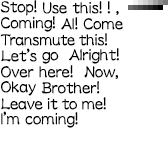
<style>
.page{position:relative;width:168px;height:160px;background:#ffffff}
.page>*{position:absolute;margin:0}
.t1{font:19px/16px "DFLeiSho-SB-WINP-RKSJ-H";color:#000000;scale:0.84 1}
.t2{font:19px/16px "DFLeiSho-SB-WINP-RKSJ-H";letter-spacing:-0.075em;color:#000000;scale:0.78 1}
.t3{font:19px/16px "DFLeiSho-SB-WINP-RKSJ-H";letter-spacing:-0.01em;color:#000000;scale:0.82 1}
.t4{font:19px/16px "DFLeiSho-SB-WINP-RKSJ-H";letter-spacing:-0.01em;color:#000000;scale:0.83 1}
.t5{font:19px/16px "DFLeiSho-SB-WINP-RKSJ-H";color:#000000;scale:0.83 1}
.t6{font:19px/16px "DFLeiSho-SB-WINP-RKSJ-H";letter-spacing:-0.01em;color:#000000;scale:0.81 1}
.t7{font:19px/16px "DFLeiSho-SB-WINP-RKSJ-H";letter-spacing:-0.05em;color:#000000;scale:0.81 1}
.t8{font:19px/16px "DFLeiSho-SB-WINP-RKSJ-H";letter-spacing:0.01em;color:#000000;scale:0.84 1}
.t9{font:19px/16px "DFLeiSho-SB-WINP-RKSJ-H";letter-spacing:-0.8em;color:#000000;scale:0.84 1}
.t10{font:19px/16px "DFLeiSho-SB-WINP-RKSJ-H";letter-spacing:-0.01em;color:#000000;scale:0.8 1}
.t11{font:19px/16px "DFLeiSho-SB-WINP-RKSJ-H";letter-spacing:-0.01em;color:#000000;scale:0.84 1}
</style>
<div class="page">
<p class="t1" style="left:0px;top:0px;width:123px;height:128px">Stop! Use this! ! ,<br>Coming! Al! Come<br><span class="t2">T</span><span class="t3">r</span><span class="t4">an</span><span class="t5">s</span><span class="t6">m</span><span class="t7">u</span><span class="t6">te </span><span class="t4">this!<br></span>Le<span class="t8">t</span><span class="t9">’</span>s go  Alright!<br>Over here!  Now,<br>Okay Brother!<br><span class="t10">L</span><span class="t11">eave it to me!<br></span>I<span class="t9">’</span>m coming!</p>
</div>
